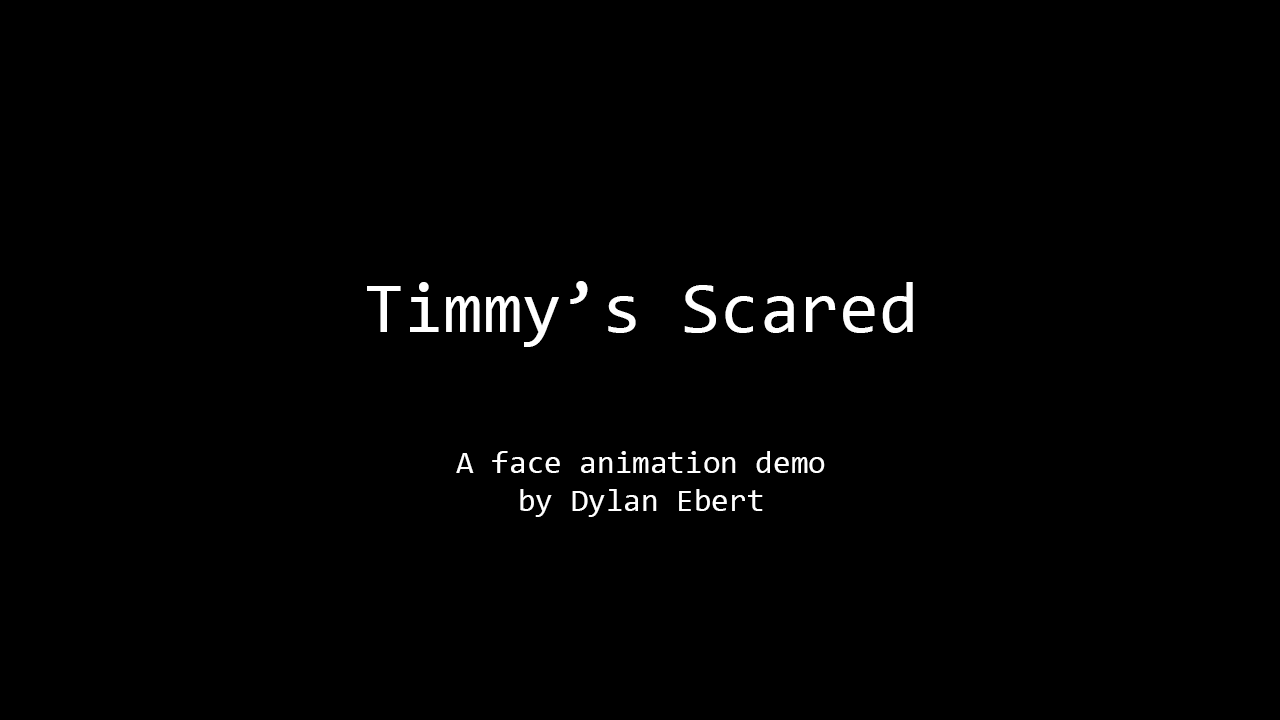
<style>
.page{position:relative;width:1280px;height:720px;background:#000000}
.page>*{position:absolute;margin:0}
.t1{font:72px "Consolas";color:#ffffff}
.t2{font:32px "Consolas";color:#ffffff}
</style>
<div class="page">
<p class="t1" style="left:367px;top:281px;width:546px;height:66px">Timmy’s Scared</p>
<p class="t2" style="left:456px;top:451px;width:369px;height:66px;text-align:center">A face animation demo<br>by Dylan Ebert</p>
</div>
